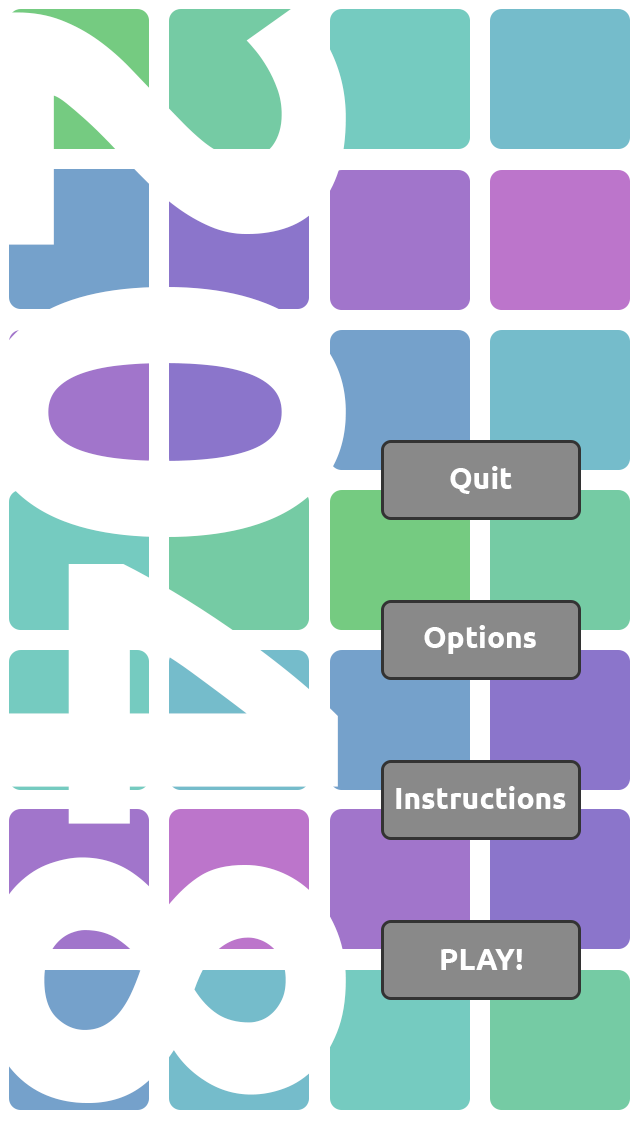
<style>
.page{position:relative;width:640px;height:1136px;background:#ffffff}
.page>*{position:absolute;margin:0}
.t1{font:30px "Ubuntu-Bold";color:#ffffff}
</style>
<div class="page">
<p class="t1" style="left:450px;top:466px;width:62px;height:28px">Quit</p>
<p class="t1" style="left:424px;top:625px;width:112px;height:29px">Options</p>
<p class="t1" style="left:396px;top:786px;width:170px;height:23px">Instructions</p>
<p class="t1" style="left:441px;top:949px;width:81px;height:21px">PLAY!</p>
</div>
